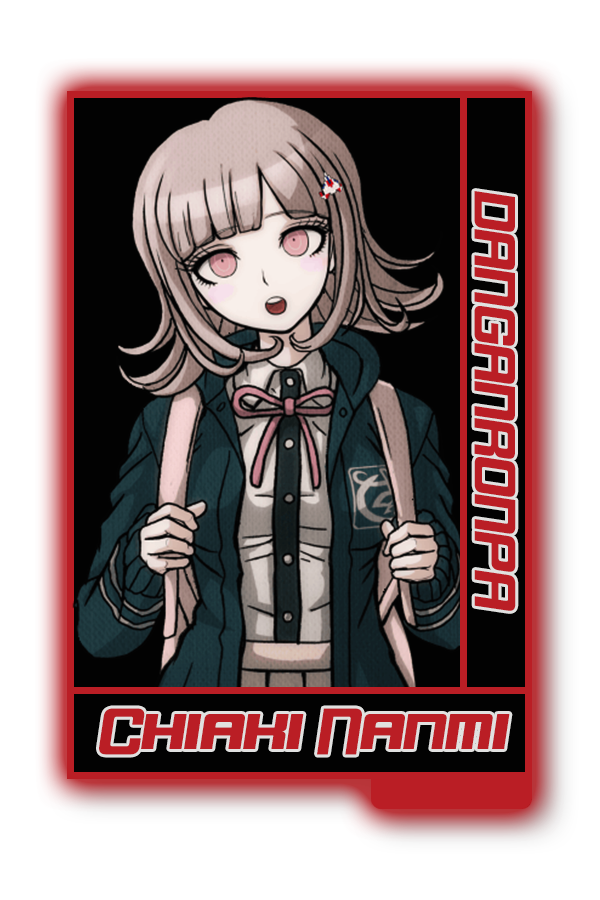
<style>
.page{position:relative;width:600px;height:900px;background:#ffffff}
.page>*{position:absolute;margin:0}
.t1{font:48.8px "DorBlue";color:#bb2c2e}
.t2{font:55.4px "DorBlue";color:#bb2c2e}
</style>
<div class="page">
<p class="t1" style="left:474px;top:191px;width:42px;height:420px;rotate:90deg">DANGANRONPA</p>
<p class="t2" style="left:99px;top:708px;width:411px;height:47px">Chiaki Nanmi</p>
</div>
